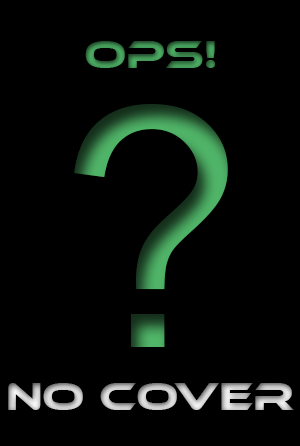
<style>
.page{position:relative;width:300px;height:446px;background:#000000}
.page>*{position:absolute;margin:0}
.t1{font:39.6px "EthnocentricRg-Regular";color:#50b568}
.t2{font:333.3px "ArialMT";color:#50b568}
.t3{font:39.6px "EthnocentricRg-Regular";color:#ffffff}
</style>
<div class="page">
<p class="t1" style="left:85px;top:41px;width:131px;height:27px">OPS!</p>
<p class="t2" style="left:74px;top:104px;width:154px;height:243px">?</p>
<p class="t3" style="left:8px;top:383px;width:286px;height:27px">NO COVER</p>
</div>
